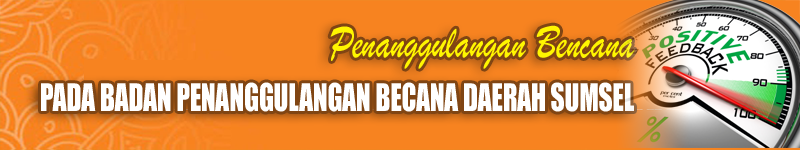
<style>
.page{position:relative;width:800px;height:150px;background:#f78320}
.page>*{position:absolute;margin:0}
.t1{font:35.3px/53.2px "Impact";color:#ffffff;scale:0.76 1}
.t2{font:48.1px/68.5px "BrushScriptMT";color:#fff600;scale:0.76 1}
</style>
<div class="page">
<p class="t1" style="left:41px;top:25px;width:594px;height:87px;text-align:right"><span class="t2">Penanggulangan Bencana<br></span>PADA BADAN PENANGGULANGAN BECANA DAERAH SUMSEL</p>
</div>
